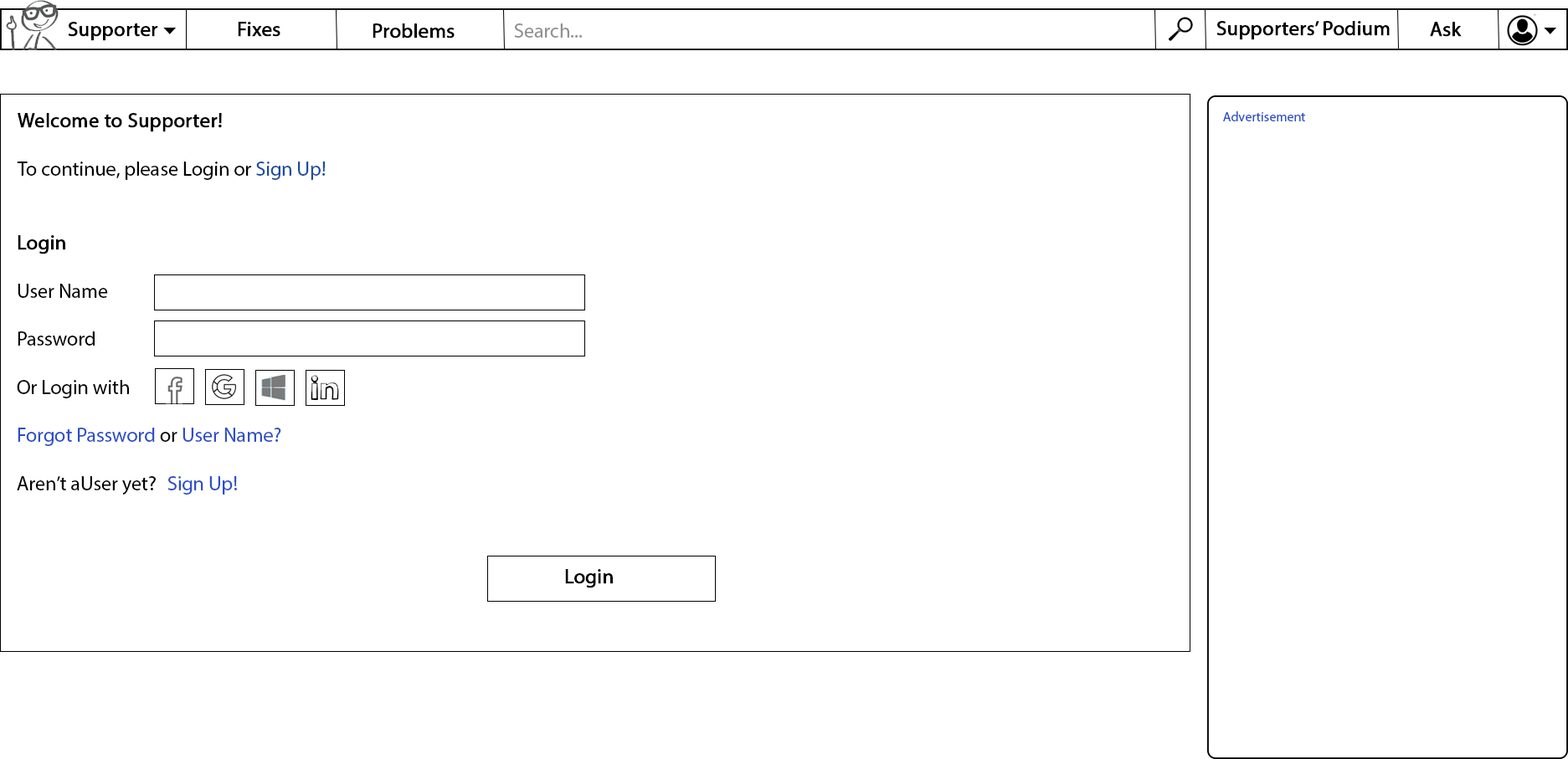
<style>
.page{position:relative;width:1568px;height:759px;background:#ffffff}
.page>*{position:absolute;margin:0}
.t1{font:20.1px "MyriadPro-Regular";color:#000000;font-weight:bold}
.t2{font:20.1px "MyriadPro-Regular";color:#919090}
.t3{font:20.1px "MyriadPro-Regular";color:#010000;font-weight:bold}
.t4{font:20.1px "MyriadPro-Regular";color:#000000}
.t5{font:20.1px "MyriadPro-Regular";color:#1a4c9d}
.t6{font:13.4px "MyriadPro-Regular";color:#2d4fc9}
.t7{font:20.1px "MyriadPro-Regular";color:#2d4fc9}
</style>
<div class="page">
<p class="t1" style="left:68px;top:22px;width:90px;height:19px">Supporter</p>
<p class="t1" style="left:238px;top:22px;width:42px;height:15px">Fixes</p>
<p class="t1" style="left:373px;top:23px;width:82px;height:16px">Problems</p>
<p class="t2" style="left:514px;top:23px;width:69px;height:15px">Search...</p>
<p class="t3" style="left:1216px;top:21px;width:174px;height:19px">Supporters’ Podium</p>
<p class="t1" style="left:1430px;top:22px;width:32px;height:15px">Ask</p>
<p class="t4" style="left:17px;top:113px;width:309px;height:67px"><span class="t1">Welcome to Supporter!<br><br></span>To continue, please Login or <span class="t5">Sign Up!</span></p>
<p class="t6" style="left:1223px;top:111px;width:82px;height:10px">Advertisement</p>
<p class="t4" style="left:17px;top:235px;width:264px;height:260px"><span class="t1">Login</span><br><br>User Name<br><br>Password<br><br>Or Login with<br><br><span class="t7">Forgot Password</span> or <span class="t7">User Name?<br><br></span>Aren’t aUser yet? <span class="t7"> Sign Up!</span></p>
<p class="t1" style="left:565px;top:569px;width:48px;height:20px">Login</p>
</div>
